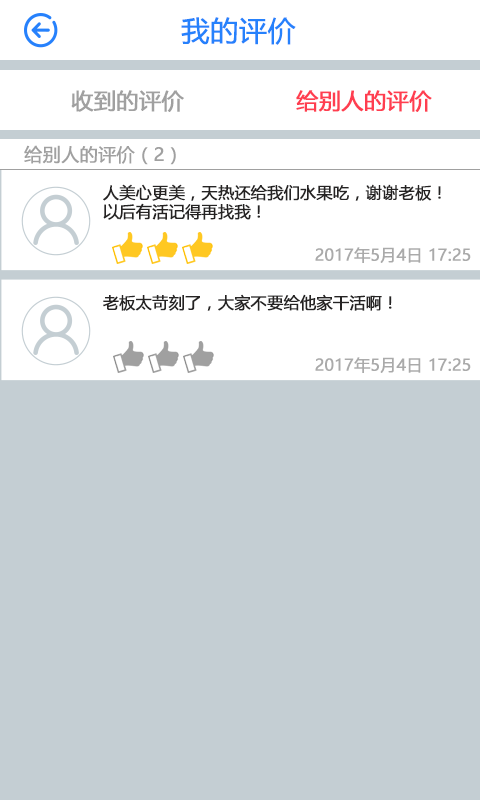
<style>
.page{position:relative;width:480px;height:800px;background:#c4ced3}
.page>*{position:absolute;margin:0}
.t1{font:28px "MicrosoftYaHei";color:#2681fc;font-weight:bold}
.t2{font:22px "MicrosoftYaHei";color:#a0a0a0;font-weight:bold}
.t3{font:22px "MicrosoftYaHei";color:#ff3e50;font-weight:bold}
.t4{font:18px "MicrosoftYaHei";color:#a0a0a0;font-weight:bold}
.t5{font:16px "MicrosoftYaHei";color:#252323;font-weight:bold}
.t6{font:16px "MicrosoftYaHei";color:#aaaaaa;font-weight:bold}
</style>
<div class="page">
<p class="t1" style="left:181px;top:17px;width:115px;height:28px">我的评价</p>
<p class="t2" style="left:71px;top:90px;width:113px;height:22px">收到的评价</p>
<p class="t3" style="left:296px;top:90px;width:136px;height:22px">给别人的评价</p>
<p class="t4" style="left:24px;top:145px;width:152px;height:20px">给别人的评价（2）</p>
<p class="t5" style="left:103px;top:184px;width:338px;height:36px">人美心更美，天热还给我们水果吃，谢谢老板！<br>以后有活记得再找我！</p>
<p class="t6" style="left:315px;top:247px;width:156px;height:16px">2017年5月4日 17:25</p>
<p class="t5" style="left:103px;top:294px;width:289px;height:17px">老板太苛刻了，大家不要给他家干活啊！</p>
<p class="t6" style="left:315px;top:357px;width:156px;height:16px">2017年5月4日 17:25</p>
</div>
